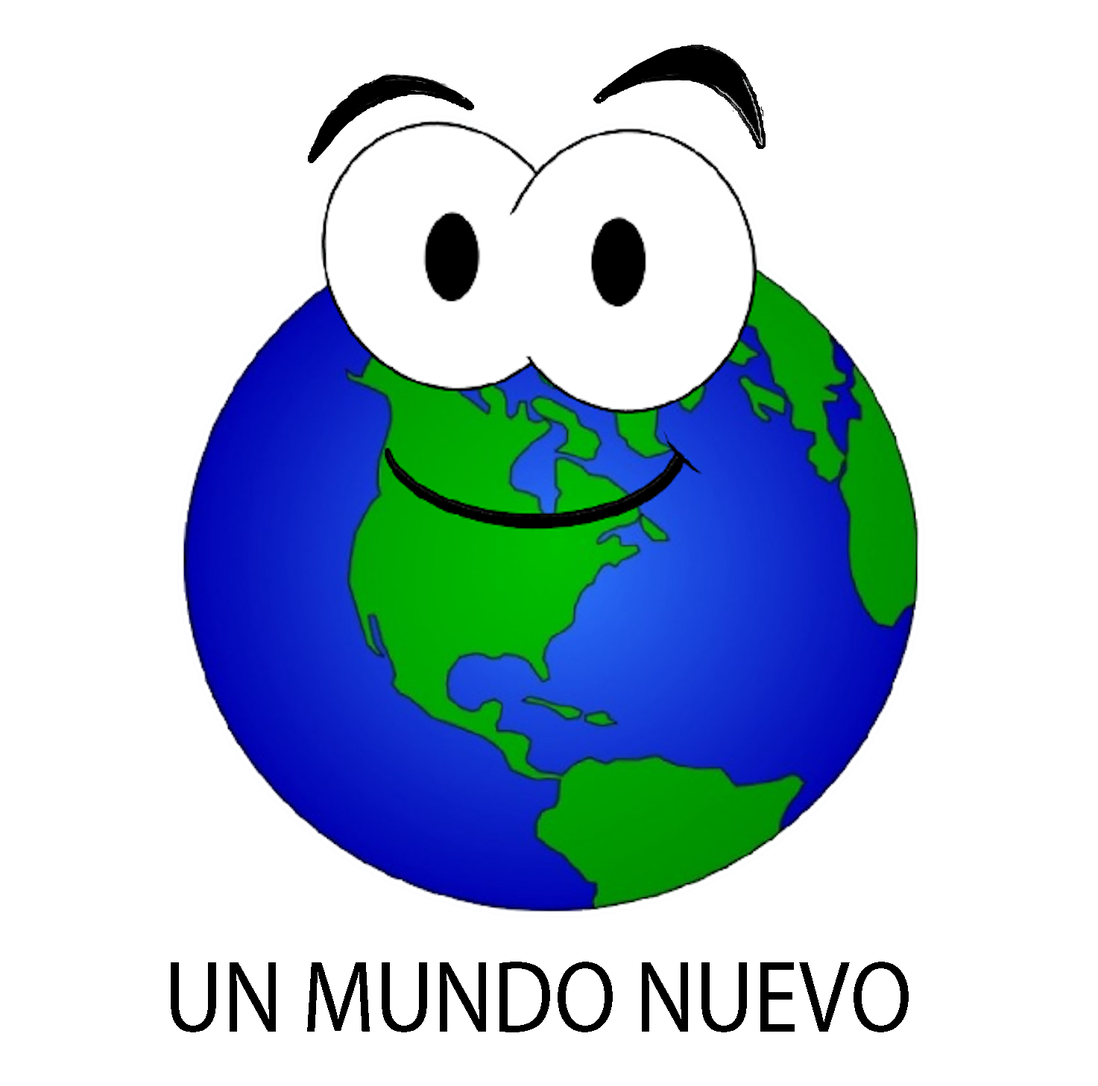
<style>
.page{position:relative;width:1098px;height:1086px;background:#ffffff}
.page>*{position:absolute;margin:0}
.t1{font:102.6px "MyriadPro-Regular";color:#000000;scale:0.88 1}
</style>
<div class="page">
<p class="t1" style="left:171px;top:962px;width:737px;height:71px">UN MUNDO NUEVO</p>
</div>
